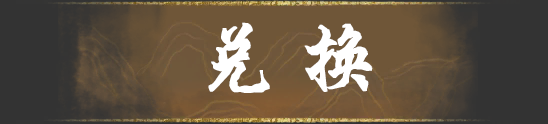
<style>
.page{position:relative;width:548px;height:124px;background:#333333}
.page>*{position:absolute;margin:0}
.t1{font:80px "SingkaibeiEG-Bold-GB";color:#ffffff;font-weight:bold}
</style>
<div class="page">
<p class="t1" style="left:208px;top:22px;width:165px;height:71px">兑 换</p>
</div>
